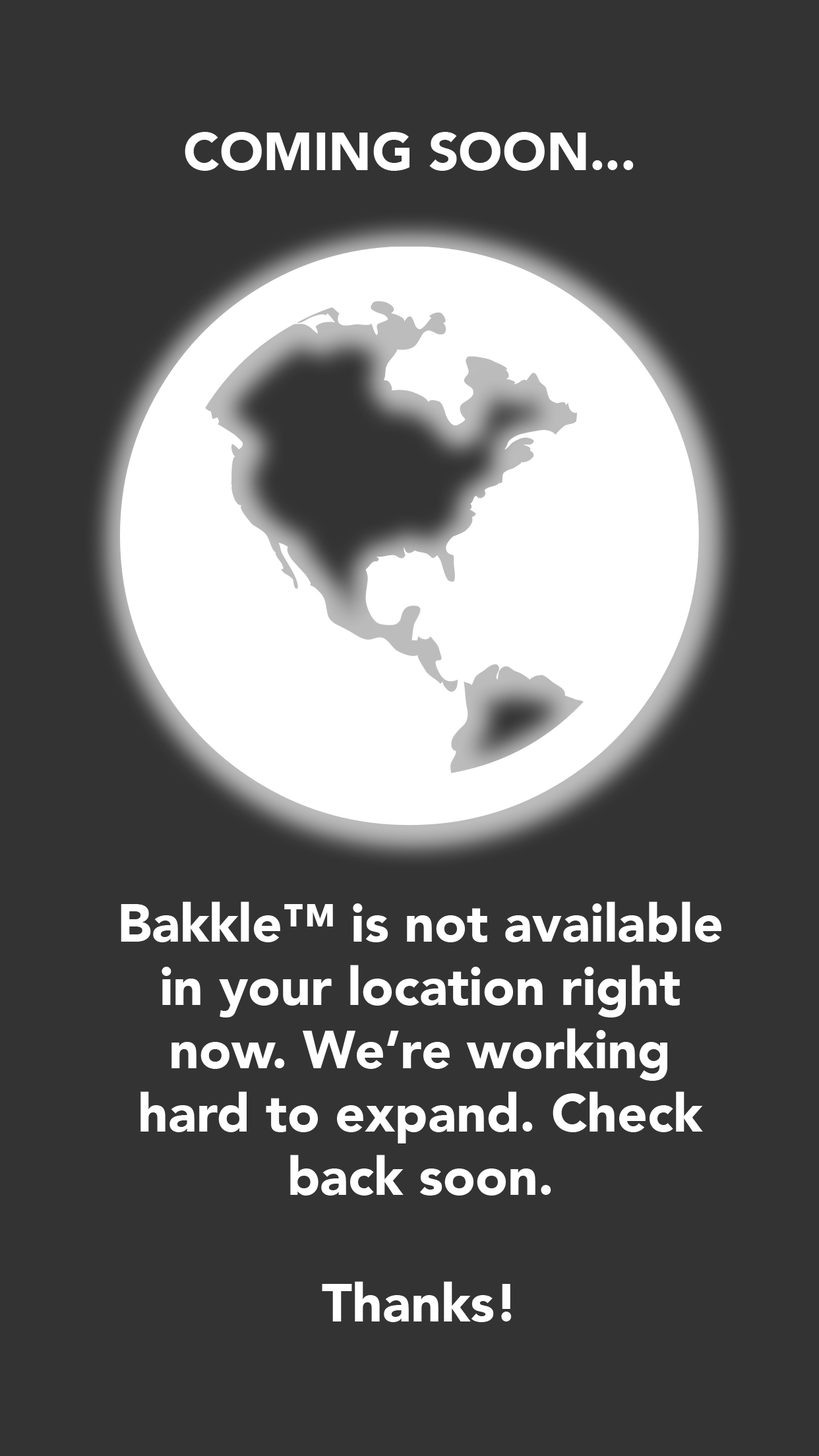
<style>
.page{position:relative;width:819px;height:1456px;background:#333333}
.page>*{position:absolute;margin:0}
.t1{font:52.8px "Avenir-Black";color:#ffffff}
</style>
<div class="page">
<p class="t1" style="left:185px;top:132px;width:449px;height:39px">COMING SOON...</p>
<p class="t1" style="left:121px;top:901px;width:600px;height:421px;text-align:center">Bakkle™ is not available in your location right now. We’re working hard to expand. Check back soon.<br><br>Thanks!</p>
</div>
